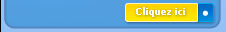
<style>
.page{position:relative;width:226px;height:32px}
.page>*{position:absolute;margin:0}
.t1{font:10px "Tahoma-Bold";color:#ffffff}
</style>
<div class="page">
<p class="t1" style="left:136px;top:7px;width:49px;height:10px">Cliquez ici</p>
</div>
